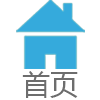
<style>
.page{position:relative;width:100px;height:100px;background:#ffffff}
.page>*{position:absolute;margin:0}
.t1{font:27.8px "MicrosoftYaHei";color:#6d6d6d}
</style>
<div class="page">
<p class="t1" style="left:22px;top:71px;width:56px;height:27px">首页</p>
</div>
